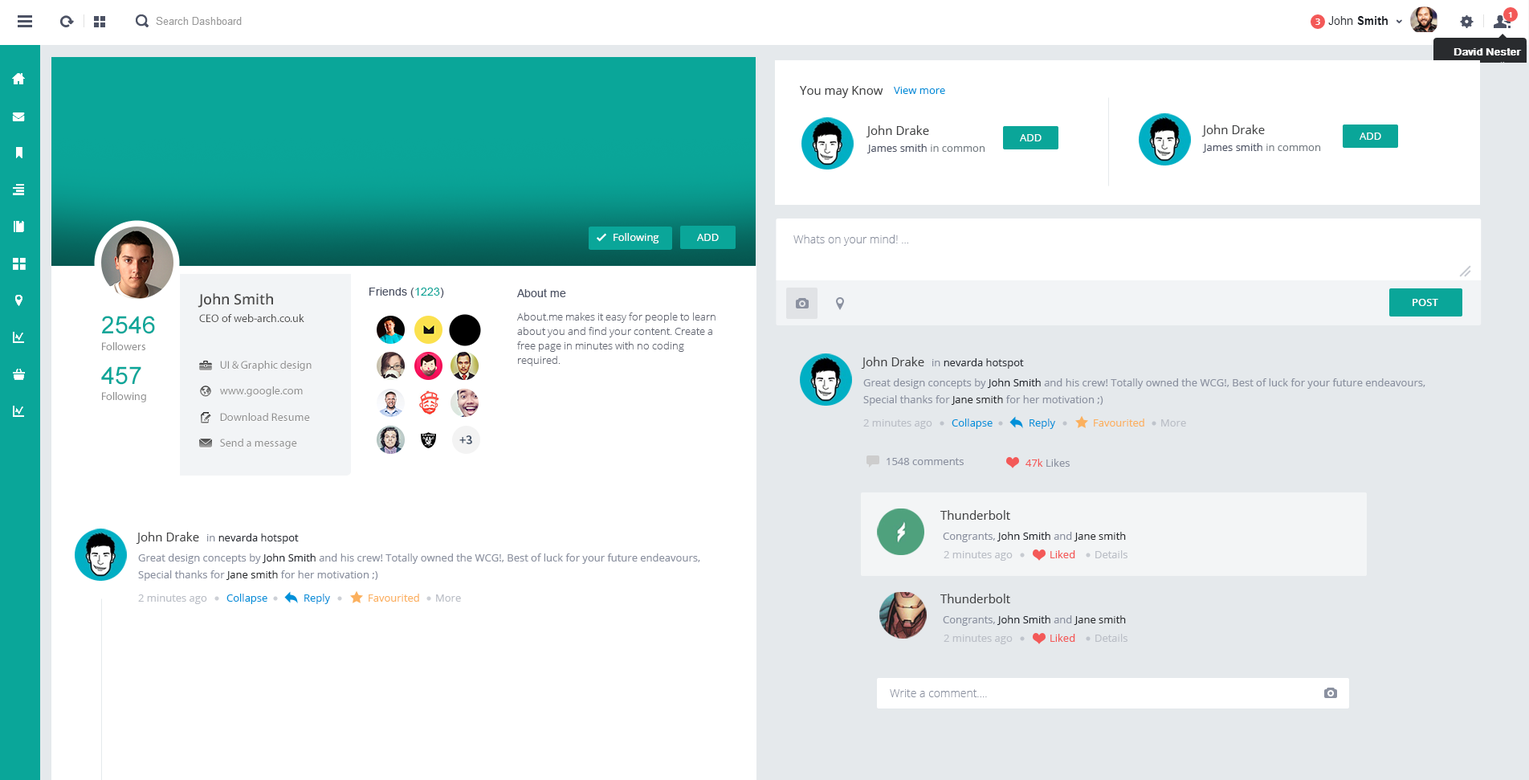
<style>
.page{position:relative;width:1529px;height:780px;background:#ffffff}
.page>*{position:absolute;margin:0}
.t1{font:12px "OpenSans";color:#414243}
.t2{font:10.4px "OpenSans";color:#0090d9}
.t3{font:10.4px "OpenSans";color:#ffffff}
.t4{font:10.4px "OpenSans";color:#4c5264}
.t5{font:10.4px "OpenSans";color:#767e84}
.t6{font:11.2px "OpenSans-Light";color:#8b91a0}
.t7{font:14.5px "OpenSans-Semibold";color:#4d4d4d}
.t8{font:11.2px "ArialMT";color:#4c5264}
.t9{font:11.2px "ArialMT";color:#0aa699}
.t10{font:10.4px "OpenSans-Semibold";color:#ffffff}
.t11{font:24.1px "ArialMT";color:#0aa699}
.t12{font:11.2px "MyriadPro-Regular";color:#4d4d4d}
.t13{font:10.4px/14.5px "OpenSans-Light";color:#616571}
.t14{font:11.2px "MyriadPro-Regular";color:#8c8c8c}
.t15{font:10.4px "OpenSans";color:#2a2e36}
.t16{font:10.4px "OpenSans";color:#8b91a0}
.t17{font:10.4px/16.8px "OpenSans";color:#8b91a0}
.t18{font:10.4px/16.8px "OpenSans";color:#22262e}
.t19{font:10.4px/16.8px "OpenSans";color:#292b2e}
.t20{font:10.4px "OpenSans";color:#babec6}
.t21{font:10.4px "OpenSans";color:#fbb05e}
.t22{font:10.4px "OpenSans";color:#f35958}
.t23{font:10.4px "OpenSans";color:#22262e}
.t24{font:10.4px "OpenSans";color:#292b2e}
</style>
<div class="page">
<p class="t1" style="left:800px;top:86px;width:83px;height:12px">You may Know</p>
<p class="t2" style="left:894px;top:87px;width:51px;height:7px">View more</p>
<p class="t1" style="left:866px;top:125px;width:63px;height:12px">John Drake</p>
<p class="t1" style="left:1201px;top:124px;width:64px;height:13px">John Drake</p>
<p class="t3" style="left:1020px;top:134px;width:22px;height:7px">ADD</p>
<p class="t3" style="left:1360px;top:133px;width:21px;height:7px">ADD</p>
<p class="t4" style="left:867px;top:144px;width:118px;height:9px">James smith<span class="t5"> in common</span></p>
<p class="t4" style="left:1202px;top:143px;width:119px;height:10px">James smith<span class="t5"> in common</span></p>
<p class="t3" style="left:614px;top:233px;width:45px;height:10px">Following</p>
<p class="t3" style="left:697px;top:234px;width:22px;height:7px">ADD</p>
<p class="t6" style="left:793px;top:235px;width:115px;height:11px">Whats on your mind! ...</p>
<p class="t7" style="left:198px;top:293px;width:75px;height:15px">John Smith</p>
<p class="t8" style="left:369px;top:288px;width:75px;height:10px">Friends (<span class="t9">1223</span>)</p>
<p class="t8" style="left:517px;top:288px;width:49px;height:9px">About me</p>
<p class="t10" style="left:1413px;top:299px;width:25px;height:7px">POST</p>
<p class="t11" style="left:102px;top:316px;width:53px;height:18px">2546</p>
<p class="t12" style="left:199px;top:314px;width:105px;height:8px">CEO of web-arch.co.uk</p>
<p class="t13" style="left:517px;top:312px;width:199px;height:54px">About.me makes it easy for people to learn about you and find your content. Create a free page in minutes with no coding required.</p>
<p class="t14" style="left:102px;top:342px;width:43px;height:8px">Followers</p>
<p class="t14" style="left:220px;top:361px;width:92px;height:10px">UI &amp; Graphic design</p>
<p class="t1" style="left:861px;top:357px;width:63px;height:12px">John Drake</p>
<p class="t15" style="left:932px;top:358px;width:92px;height:11px"><span class="t16">in </span>nevarda hotspot</p>
<p class="t11" style="left:101px;top:366px;width:40px;height:19px">457</p>
<p class="t14" style="left:220px;top:386px;width:83px;height:11px">www.google.com</p>
<p class="t17" style="left:863px;top:378px;width:563px;height:28px">Great design concepts by <span class="t18">John Smith </span>and his crew! Totally owned the WCG!, Best of luck for your future endeavours, <br>Special thanks for <span class="t19">Jane smith</span> for her motivation ;)</p>
<p class="t14" style="left:102px;top:392px;width:44px;height:10px">Following</p>
<p class="t14" style="left:220px;top:413px;width:90px;height:8px">Download Resume</p>
<p class="t20" style="left:863px;top:419px;width:69px;height:10px">2 minutes ago</p>
<p class="t2" style="left:952px;top:418px;width:41px;height:11px">Collapse</p>
<p class="t2" style="left:1030px;top:418px;width:25px;height:11px">Reply</p>
<p class="t21" style="left:1094px;top:418px;width:50px;height:8px">Favourited</p>
<p class="t20" style="left:1161px;top:419px;width:25px;height:7px">More</p>
<p class="t14" style="left:220px;top:438px;width:77px;height:11px">Send a message</p>
<p class="t16" style="left:887px;top:458px;width:77px;height:7px">1548 comments</p>
<p class="t16" style="left:1026px;top:459px;width:44px;height:8px"><span class="t22">47k</span> Likes</p>
<p class="t1" style="left:940px;top:510px;width:70px;height:10px">Thunderbolt</p>
<p class="t1" style="left:136px;top:532px;width:63px;height:12px">John Drake</p>
<p class="t15" style="left:207px;top:533px;width:92px;height:11px"><span class="t16">in </span>nevarda hotspot</p>
<p class="t16" style="left:943px;top:532px;width:183px;height:10px">Congrants, <span class="t23">John Smith </span>and <span class="t24">Jane smith</span></p>
<p class="t17" style="left:138px;top:553px;width:562px;height:28px">Great design concepts by <span class="t18">John Smith </span>and his crew! Totally owned the WCG!, Best of luck for your future endeavours, <br>Special thanks for <span class="t19">Jane smith</span> for her motivation ;)</p>
<p class="t20" style="left:944px;top:551px;width:69px;height:10px">2 minutes ago</p>
<p class="t22" style="left:1050px;top:550px;width:25px;height:8px">Liked</p>
<p class="t20" style="left:1095px;top:550px;width:33px;height:8px">Details</p>
<p class="t2" style="left:226px;top:593px;width:41px;height:11px">Collapse</p>
<p class="t2" style="left:304px;top:593px;width:26px;height:11px">Reply</p>
<p class="t21" style="left:369px;top:593px;width:50px;height:9px">Favourited</p>
<p class="t1" style="left:940px;top:593px;width:70px;height:10px">Thunderbolt</p>
<p class="t20" style="left:138px;top:594px;width:69px;height:10px">2 minutes ago</p>
<p class="t20" style="left:436px;top:594px;width:25px;height:8px">More</p>
<p class="t16" style="left:943px;top:615px;width:183px;height:11px">Congrants, <span class="t23">John Smith </span>and <span class="t24">Jane smith</span></p>
<p class="t20" style="left:944px;top:634px;width:69px;height:10px">2 minutes ago</p>
<p class="t22" style="left:1050px;top:634px;width:25px;height:8px">Liked</p>
<p class="t20" style="left:1095px;top:634px;width:33px;height:8px">Details</p>
<p class="t6" style="left:890px;top:689px;width:97px;height:8px">Write a comment....</p>
</div>
